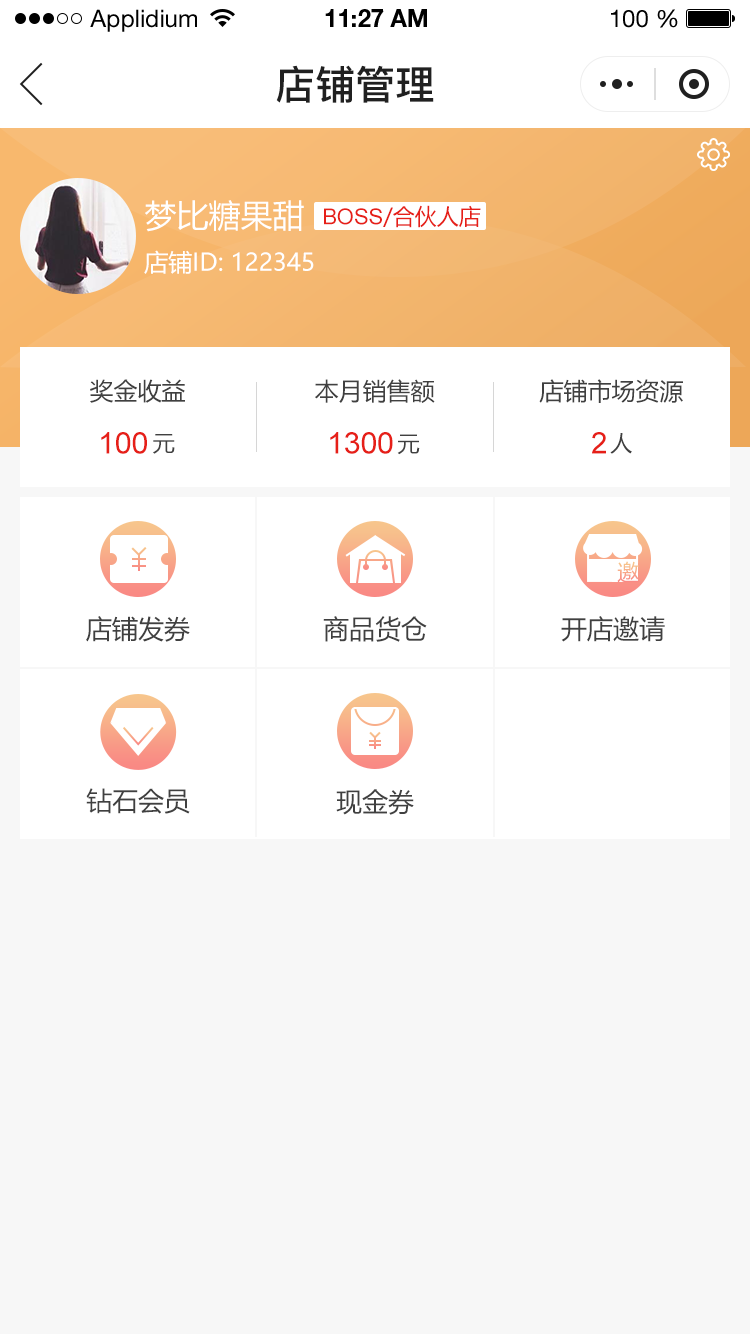
<style>
.page{position:relative;width:750px;height:1334px;background:#f7f7f7}
.page>*{position:absolute;margin:0}
.t1{font:24px "HelveticaNeueLTStd-Roman";color:#000000}
.t2{font:24px "HelveticaNeueLTStd-Bd";color:#000000}
.t3{font:40px "PingFang-SC-Bold";color:#202020;text-transform:uppercase}
.t4{font:32px "MicrosoftYaHei";color:#ffffff;text-transform:uppercase}
.t5{font:22px "MicrosoftYaHei";color:#e61f18;text-transform:uppercase}
.t6{font:22px "ArialMT";color:#e61f18;text-transform:uppercase}
.t7{font:24px "MicrosoftYaHei";color:#ffffff;text-transform:uppercase}
.t8{font:24px "MicrosoftYaHei";color:#404040;text-transform:uppercase}
.t9{font:30px "ArialMT";color:#e61f18;text-transform:uppercase}
.t10{font:22px "MicrosoftYaHei";color:#404040;text-transform:uppercase}
.t11{font:22px "MicrosoftYaHei";text-transform:uppercase}
.t12{font:26px "MicrosoftYaHei";color:#404040;text-transform:uppercase}
</style>
<div class="page">
<p class="t1" style="left:90px;top:9px;width:107px;height:23px">Applidium</p>
<p class="t2" style="left:325px;top:9px;width:102px;height:18px">11:27 AM</p>
<p class="t1" style="left:611px;top:9px;width:67px;height:19px">100 %</p>
<p class="t3" style="left:276px;top:65px;width:158px;height:38px">店铺管理</p>
<p class="t4" style="left:145px;top:200px;width:159px;height:32px">梦比糖果甜</p>
<p class="t5" style="left:324px;top:205px;width:157px;height:23px"><span class="t6">boss</span>/合伙人店</p>
<p class="t7" style="left:144px;top:250px;width:170px;height:24px">店铺ID: 122345</p>
<p class="t8" style="left:90px;top:379px;width:95px;height:24px">奖金收益</p>
<p class="t8" style="left:315px;top:379px;width:120px;height:24px">本月销售额</p>
<p class="t8" style="left:539px;top:379px;width:144px;height:24px">店铺市场资源</p>
<p class="t9" style="left:101px;top:432px;width:46px;height:22px">100</p>
<p class="t10" style="left:153px;top:434px;width:22px;height:20px">元</p>
<p class="t9" style="left:330px;top:432px;width:63px;height:22px">1300</p>
<p class="t10" style="left:397px;top:434px;width:23px;height:21px">元</p>
<p class="t9" style="left:592px;top:432px;width:14px;height:22px">2</p>
<p class="t10" style="left:610px;top:433px;width:22px;height:21px">人</p>
<p class="t11" style="left:617px;top:561px;width:22px;height:22px">邀</p>
<p class="t12" style="left:86px;top:616px;width:104px;height:26px">店铺发券</p>
<p class="t12" style="left:323px;top:616px;width:104px;height:26px">商品货仓</p>
<p class="t12" style="left:561px;top:616px;width:104px;height:26px">开店邀请</p>
<p class="t12" style="left:86px;top:788px;width:104px;height:26px">钻石会员</p>
<p class="t12" style="left:336px;top:789px;width:78px;height:26px">现金券</p>
</div>
